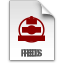
<style>
.page{position:relative;width:64px;height:64px;background:#ffffff}
.page>*{position:absolute;margin:0}
.t1{font:10px "HelveticaNeue-CondensedBlack";letter-spacing:-0.01em;color:#575757}
</style>
<div class="page">
<p class="t1" style="left:21px;top:49px;width:21px;height:8px">REDS</p>
<p class="t1" style="left:24px;top:49px;width:16px;height:8px">RED</p>
</div>
